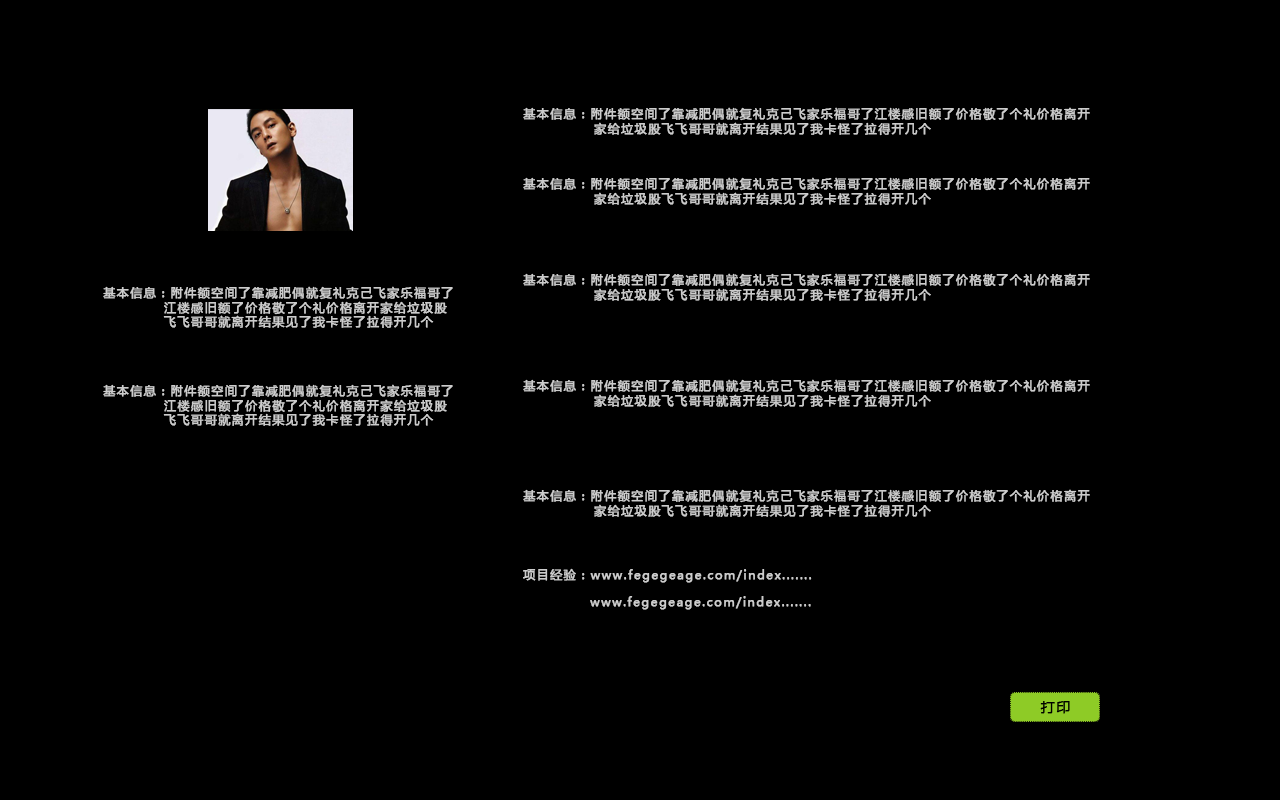
<style>
.page{position:relative;width:1280px;height:800px;background:#000000}
.page>*{position:absolute;margin:0}
.t1{font:12px "MicrosoftYaHei";letter-spacing:0.1em;color:#cccccc;font-weight:bold}
.t2{font:14px "MicrosoftYaHei";letter-spacing:0.1em;color:#000000;font-weight:bold}
</style>
<div class="page">
<p class="t1" style="left:523px;top:107px;width:567px;height:29px">基本信息：附件额空间了靠减肥偶就复礼克己飞家乐福哥了江楼感旧额了价格敬了个礼价格离开<br>              家给垃圾股飞飞哥哥就离开结果见了我卡怪了拉得开几个</p>
<p class="t1" style="left:523px;top:177px;width:567px;height:29px">基本信息：附件额空间了靠减肥偶就复礼克己飞家乐福哥了江楼感旧额了价格敬了个礼价格离开<br>              家给垃圾股飞飞哥哥就离开结果见了我卡怪了拉得开几个</p>
<p class="t1" style="left:523px;top:273px;width:567px;height:29px">基本信息：附件额空间了靠减肥偶就复礼克己飞家乐福哥了江楼感旧额了价格敬了个礼价格离开<br>              家给垃圾股飞飞哥哥就离开结果见了我卡怪了拉得开几个</p>
<p class="t1" style="left:103px;top:286px;width:350px;height:42px">基本信息：附件额空间了靠减肥偶就复礼克己飞家乐福哥了<br>            江楼感旧额了价格敬了个礼价格离开家给垃圾股<br>            飞飞哥哥就离开结果见了我卡怪了拉得开几个</p>
<p class="t1" style="left:103px;top:384px;width:350px;height:42px">基本信息：附件额空间了靠减肥偶就复礼克己飞家乐福哥了<br>            江楼感旧额了价格敬了个礼价格离开家给垃圾股<br>            飞飞哥哥就离开结果见了我卡怪了拉得开几个</p>
<p class="t1" style="left:523px;top:379px;width:567px;height:29px">基本信息：附件额空间了靠减肥偶就复礼克己飞家乐福哥了江楼感旧额了价格敬了个礼价格离开<br>              家给垃圾股飞飞哥哥就离开结果见了我卡怪了拉得开几个</p>
<p class="t1" style="left:523px;top:489px;width:567px;height:29px">基本信息：附件额空间了靠减肥偶就复礼克己飞家乐福哥了江楼感旧额了价格敬了个礼价格离开<br>              家给垃圾股飞飞哥哥就离开结果见了我卡怪了拉得开几个</p>
<p class="t1" style="left:523px;top:568px;width:289px;height:15px">项目经验：www.fegegeage.com/index.......</p>
<p class="t1" style="left:590px;top:596px;width:221px;height:14px">www.fegegeage.com/index.......</p>
<p class="t2" style="left:1040px;top:701px;width:30px;height:13px">打印</p>
</div>
